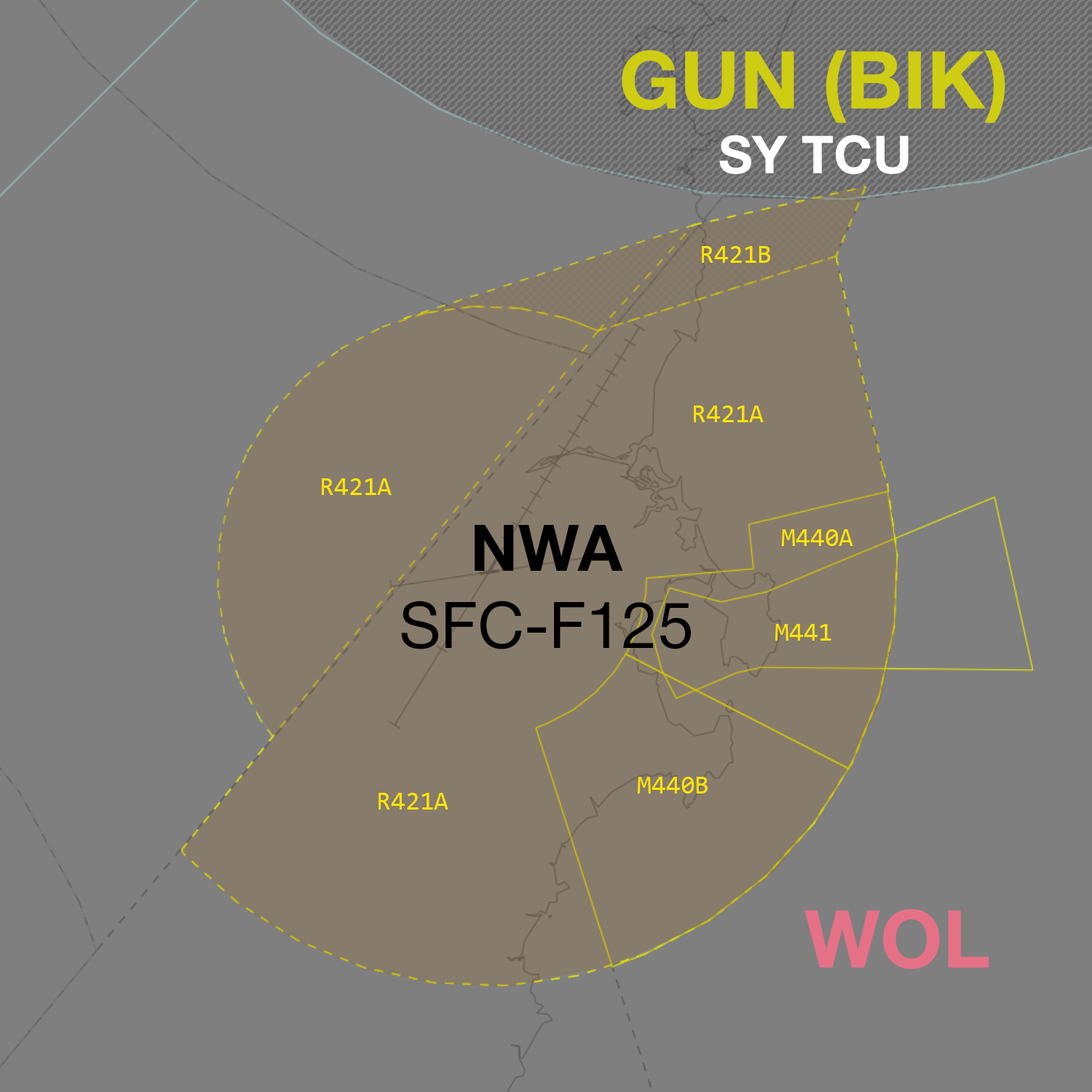
<style>
.page{position:relative;width:1092px;height:1092px;background:#7f7f7f}
.page>*{position:absolute;margin:0}
.t1{font:80.1px "HelveticaNeue-Bold";color:#cecc13}
.t2{font:52.4px "HelveticaNeue-Bold";color:#ffffff}
.t3{font:26.2px "Consolas";color:#ffe400}
.t4{font:64.4px "HelveticaNeue-Roman";color:#000000}
.t5{font:64.4px "HelveticaNeue-Bold";color:#000000}
.t6{font:80.1px "HelveticaNeue-Bold";color:#e57187}
</style>
<div class="page">
<p class="t1" style="left:622px;top:50px;width:383px;height:73px">GUN (BIK)</p>
<p class="t2" style="left:719px;top:135px;width:190px;height:40px">SY TCU</p>
<p class="t3" style="left:702px;top:246px;width:68px;height:17px">R421B</p>
<p class="t3" style="left:694px;top:405px;width:70px;height:17px">R421A</p>
<p class="t3" style="left:322px;top:478px;width:70px;height:17px">R421A</p>
<p class="t4" style="left:401px;top:525px;width:290px;height:124px;text-align:center"><span class="t5">NWA<br></span>SFC-F125</p>
<p class="t3" style="left:781px;top:529px;width:72px;height:17px">M440A</p>
<p class="t3" style="left:775px;top:624px;width:56px;height:17px">M441</p>
<p class="t3" style="left:637px;top:777px;width:71px;height:17px">M440B</p>
<p class="t3" style="left:379px;top:793px;width:69px;height:17px">R421A</p>
<p class="t6" style="left:804px;top:909px;width:185px;height:60px">WOL</p>
</div>
